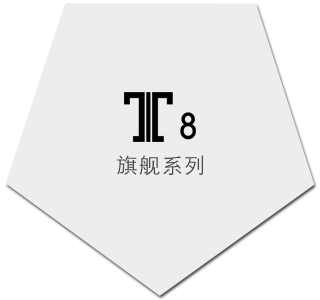
<style>
.page{position:relative;width:320px;height:300px;background:#ededed}
.page>*{position:absolute;margin:0}
.t1{font:21.3px "STXihei";letter-spacing:0.05em;color:#484848}
</style>
<div class="page">
<p class="t1" style="left:117px;top:155px;width:87px;height:21px">旗舰系列</p>
</div>
